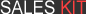
<style>
.page{position:relative;width:86px;height:14px;background:#333333}
.page>*{position:absolute;margin:0}
.t1{font:18.7px "ArialMT";color:#ffffff;scale:0.92 1}
.t2{font:18.7px "ArialMT";color:#ff3f3f;scale:0.92 1}
</style>
<div class="page">
<p class="t1" style="left:0px;top:0px;width:87px;height:15px">SALES <span class="t2">KIT</span></p>
</div>
